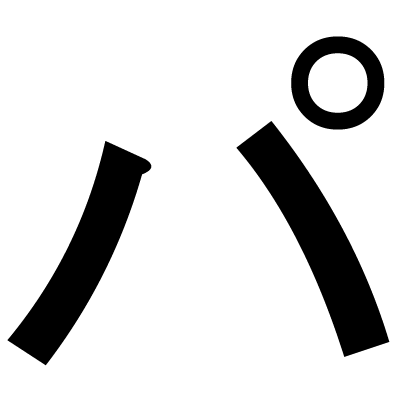
<style>
.page{position:relative;width:400px;height:400px;background:#ffffff}
.page>*{position:absolute;margin:0}
.t1{font:424.8px "MS-PGothic";color:#000000}
</style>
<div class="page">
<p class="t1" style="left:7px;top:36px;width:383px;height:330px">パ</p>
</div>
